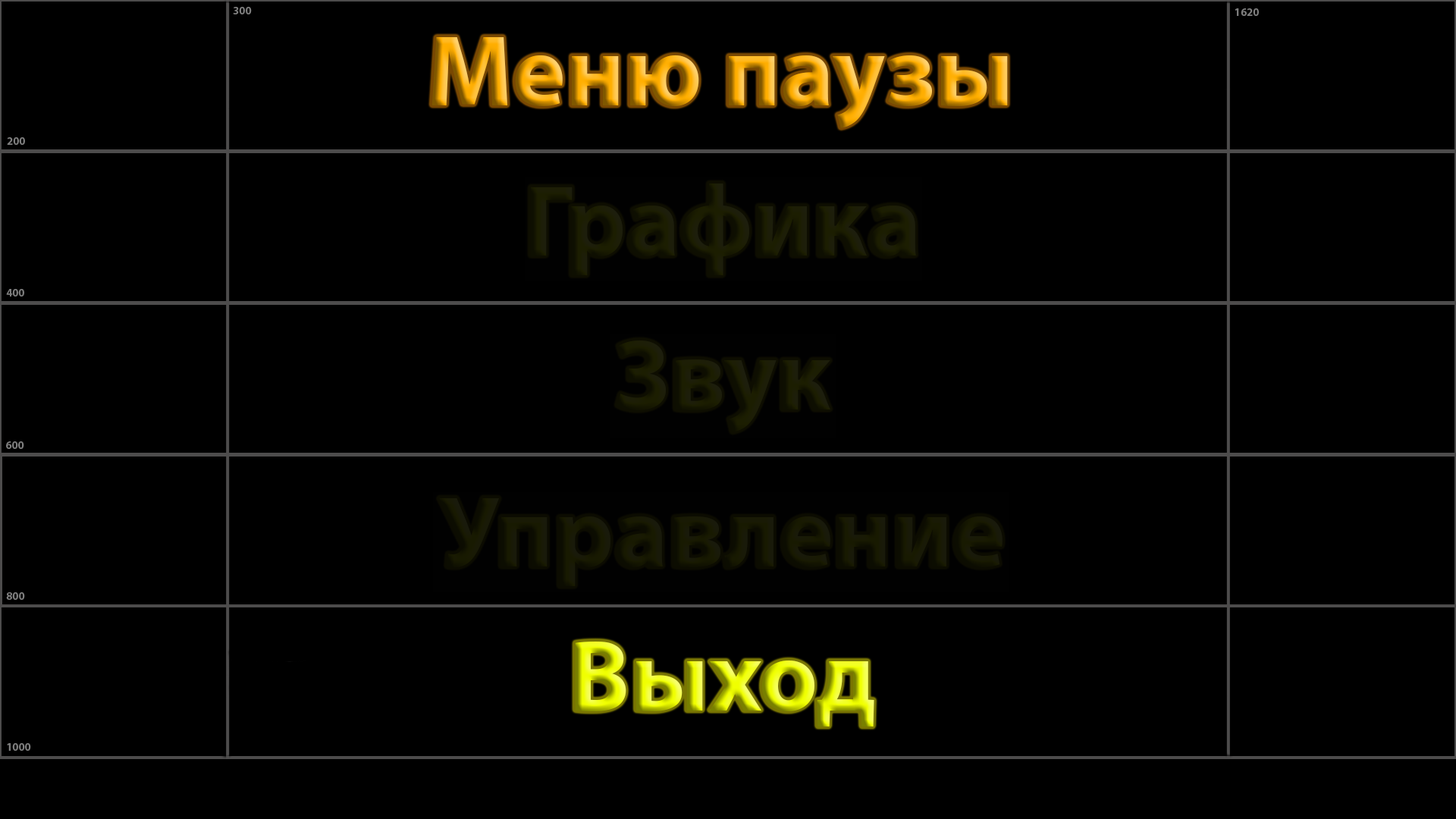
<style>
.page{position:relative;width:1456px;height:819px;background:#000000}
.page>*{position:absolute;margin:0}
.t1{font:101.1px "MyriadPro-Bold"}
.t2{font:101.1px "MyriadPro-Bold";color:#1c1e01}
.t3{font:101.1px "MyriadPro-Bold";color:#181a01}
</style>
<div class="page">
<p class="t1" style="left:431px;top:37px;width:577px;height:91px">Меню паузы</p>
<p class="t2" style="left:531px;top:184px;width:385px;height:91px">Графика</p>
<p class="t2" style="left:617px;top:340px;width:213px;height:92px">Звук</p>
<p class="t3" style="left:439px;top:498px;width:564px;height:88px">Управление</p>
<p class="t1" style="left:575px;top:642px;width:299px;height:85px">Выход</p>
</div>
